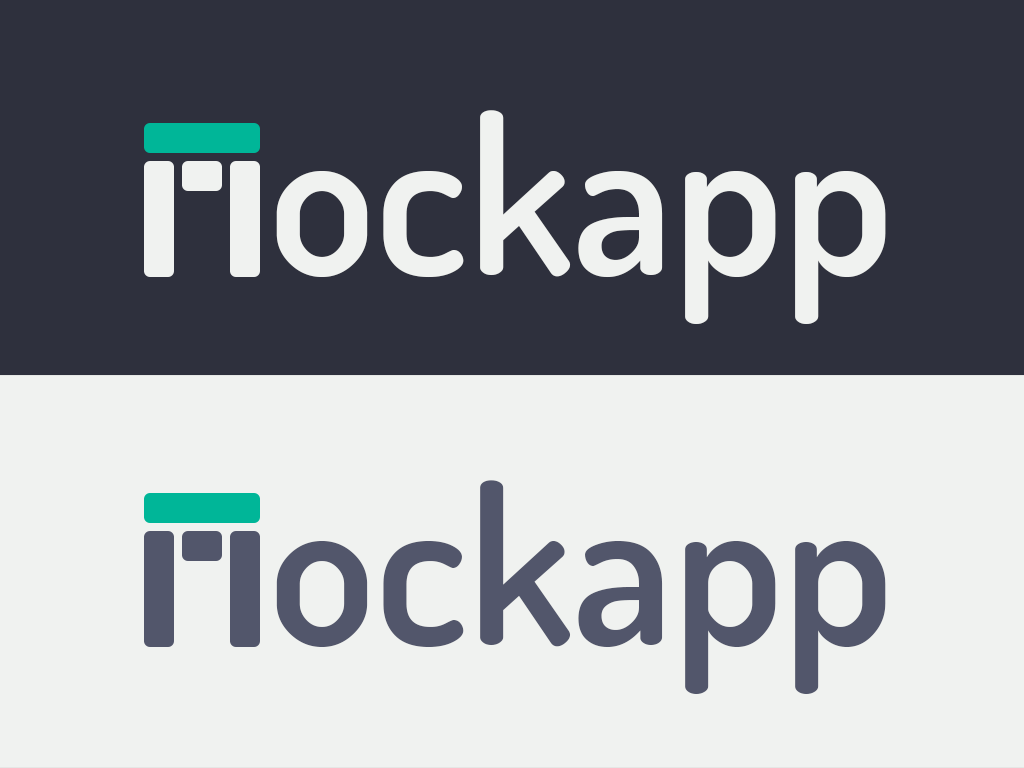
<style>
.page{position:relative;width:1024px;height:768px;background:#f0f2f0}
.page>*{position:absolute;margin:0}
.t1{font:217.7px "Dosis-SemiBold";color:#f0f2f0}
.t2{font:217.7px "Dosis-SemiBold";color:#52566b}
</style>
<div class="page">
<p class="t1" style="left:276px;top:110px;width:610px;height:214px">ockapp</p>
<p class="t2" style="left:276px;top:480px;width:610px;height:214px">ockapp</p>
</div>
